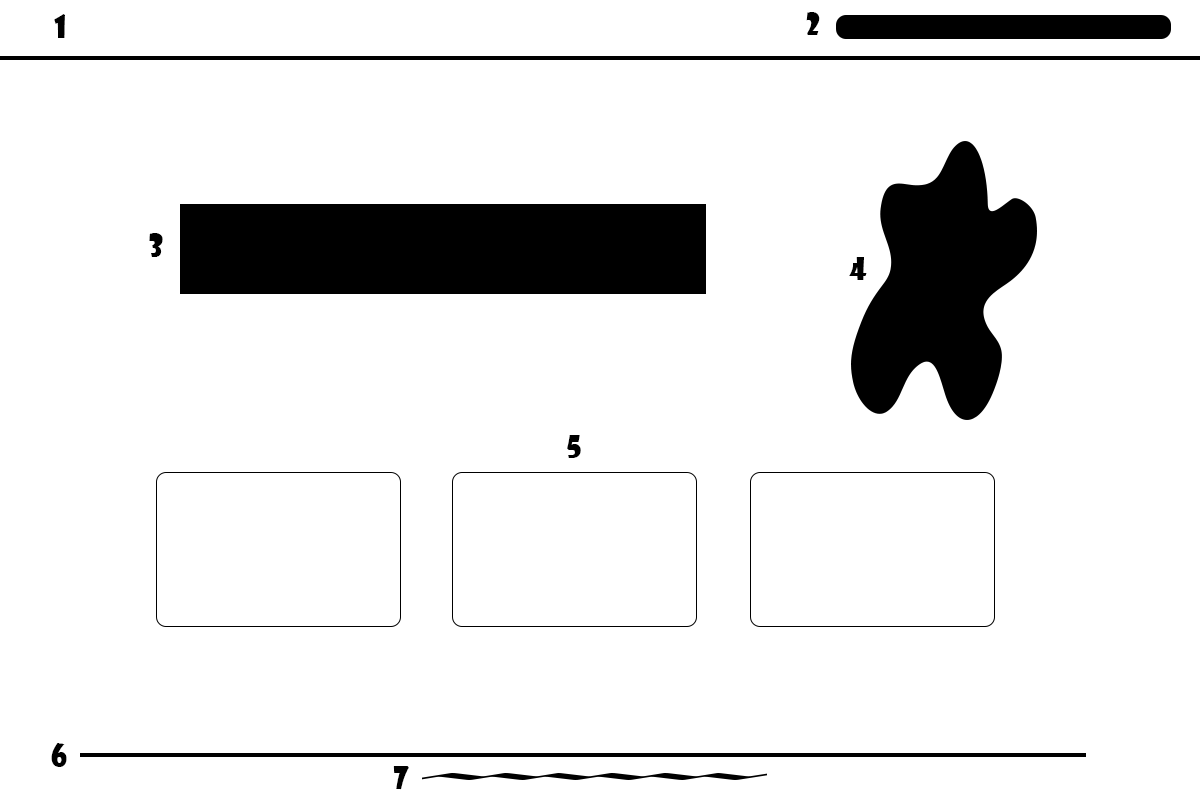
<style>
.page{position:relative;width:1200px;height:800px;background:#ffffff}
.page>*{position:absolute;margin:0}
.t1{font:30px "ShowcardGothic-Reg";color:#000000}
</style>
<div class="page">
<p class="t1" style="left:54px;top:14px;width:11px;height:24px">1</p>
<p class="t1" style="left:806px;top:12px;width:14px;height:23px">2</p>
<p class="t1" style="left:149px;top:233px;width:14px;height:24px">3</p>
<p class="t1" style="left:849px;top:257px;width:18px;height:23px">4</p>
<p class="t1" style="left:567px;top:435px;width:14px;height:23px">5</p>
<p class="t1" style="left:51px;top:743px;width:16px;height:24px">6</p>
<p class="t1" style="left:393px;top:766px;width:16px;height:24px">7</p>
</div>
